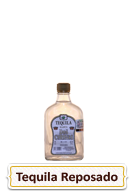
<style>
.page{position:relative;width:132px;height:195px;background:#ffffff}
.page>*{position:absolute;margin:0}
.t1{font:13.3px "Calibri-Bold";color:#3a0f07;scale:1.05 1}
</style>
<div class="page">
<p class="t1" style="left:16px;top:171px;width:102px;height:13px">Tequila Reposado</p>
</div>
